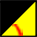
<style>
.page{position:relative;width:37px;height:37px;background:#000000}
.page>*{position:absolute;margin:0}
.t1{font:33.3px "KozGoPr6N-Regular";color:#ffff00}
</style>
<div class="page">
<p class="t1" style="left:1px;top:2px;width:35px;height:34px">◢</p>
</div>
